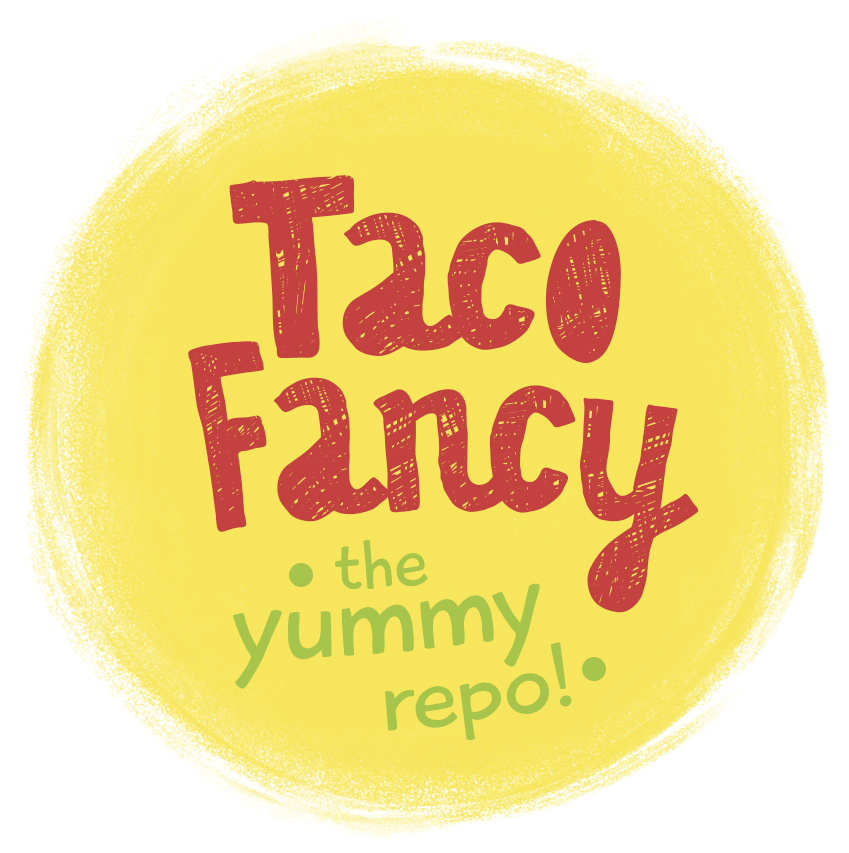
<style>
.page{position:relative;width:849px;height:853px;background:#ffffff}
.page>*{position:absolute;margin:0}
.t1{font:260px/161.1px "Chalkboard52-2-Regular";letter-spacing:-0.005em;color:#c3423f}
.t2{font:116.7px/67px "PlaytimeWithHotToddies";letter-spacing:-0.005em;color:#a7c44b}
.t3{font:72.6px/60.5px "PlaytimeWithHotToddies";letter-spacing:-0.005em;color:#a7c44b}
.t4{font:90.8px/1px "PlaytimeWithHotToddies";letter-spacing:-0.005em;color:#a7c44b}
</style>
<div class="page">
<p class="t1" style="left:188px;top:175px;width:511px;height:438px;text-align:center">Taco<br>Fancy</p>
<p class="t2" style="left:232px;top:539px;width:340px;height:202px;text-align:center;rotate:-5deg"><span class="t3">the<br></span>yummy <br>      <span class="t4">repo!</span></p>
</div>
